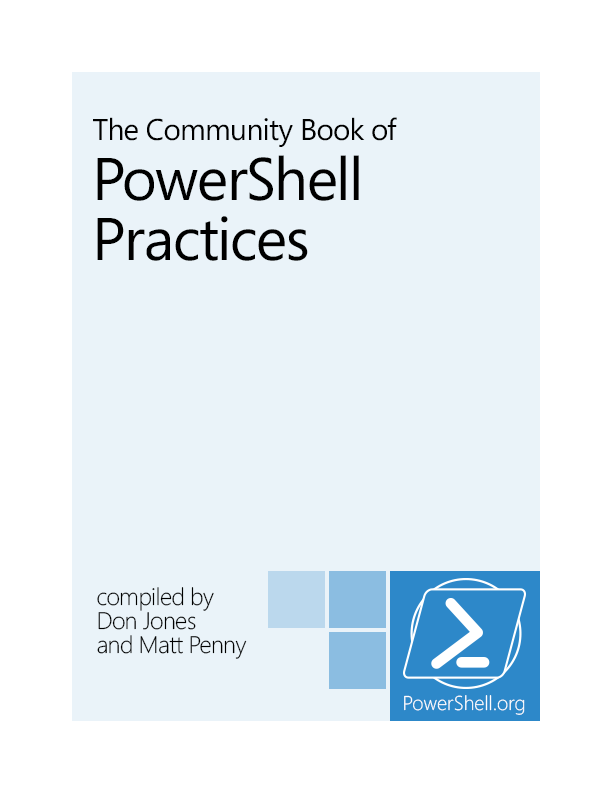
<style>
.page{position:relative;width:612px;height:792px;background:#eaf3f9}
.page>*{position:absolute;margin:0}
.t1{font:30px/60px "Segoe";letter-spacing:-0.025em;color:#000000}
.t2{font:60px/60px "Segoe";letter-spacing:-0.025em;color:#000000}
.t3{font:24px/24px "Segoe-Light";letter-spacing:-0.025em;color:#000000}
</style>
<div class="page">
<p class="t1" style="left:93px;top:117px;width:304px;height:144px">The Community Book of<br><span class="t2">PowerShell<br>Practices</span></p>
<p class="t3" style="left:97px;top:587px;width:150px;height:72px">compiled by<br>Don Jones<br>and Matt Penny</p>
</div>
